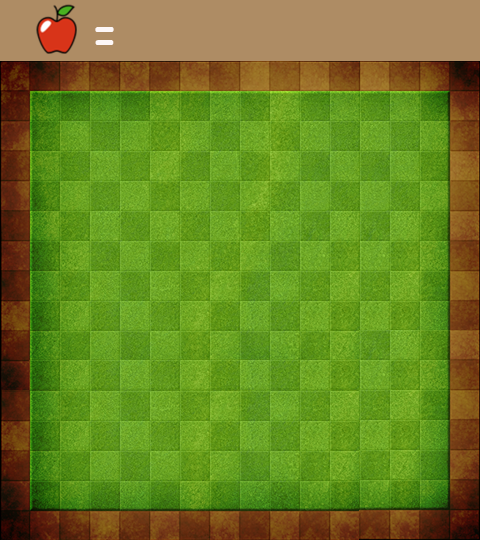
<style>
.page{position:relative;width:480px;height:540px}
.page>*{position:absolute;margin:0}
.t1{font:48px "ComicSansMS";color:#fdf7f7}
</style>
<div class="page">
<p class="t1" style="left:95px;top:27px;width:19px;height:18px">=</p>
</div>
